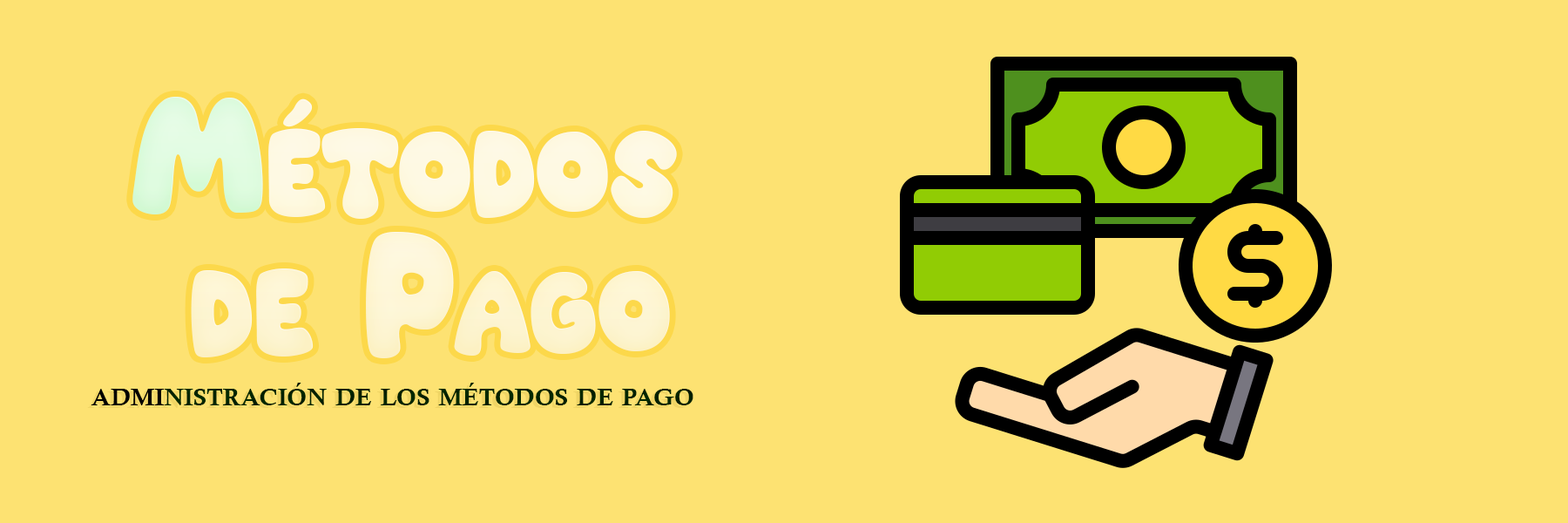
<style>
.page{position:relative;width:1568px;height:523px;background:#fde272}
.page>*{position:absolute;margin:0}
.t1{font:147.7px/139.4px "SuperBubble";color:#fef9e3;font-variant:small-caps;scale:0.87 1}
.t2{font:147.7px/139.4px "SuperBubble";color:#defbdf;font-variant:small-caps;scale:0.87 1}
.t3{font:34.8px "CalisMTBol";color:#002200;font-variant:small-caps}
</style>
<div class="page">
<p class="t1" style="left:132px;top:96px;width:545px;height:262px;text-align:center"><span class="t2">M</span>étodos <br>de Pago</p>
<p class="t3" style="left:91px;top:382px;width:602px;height:23px">administración de los métodos de pago</p>
</div>
